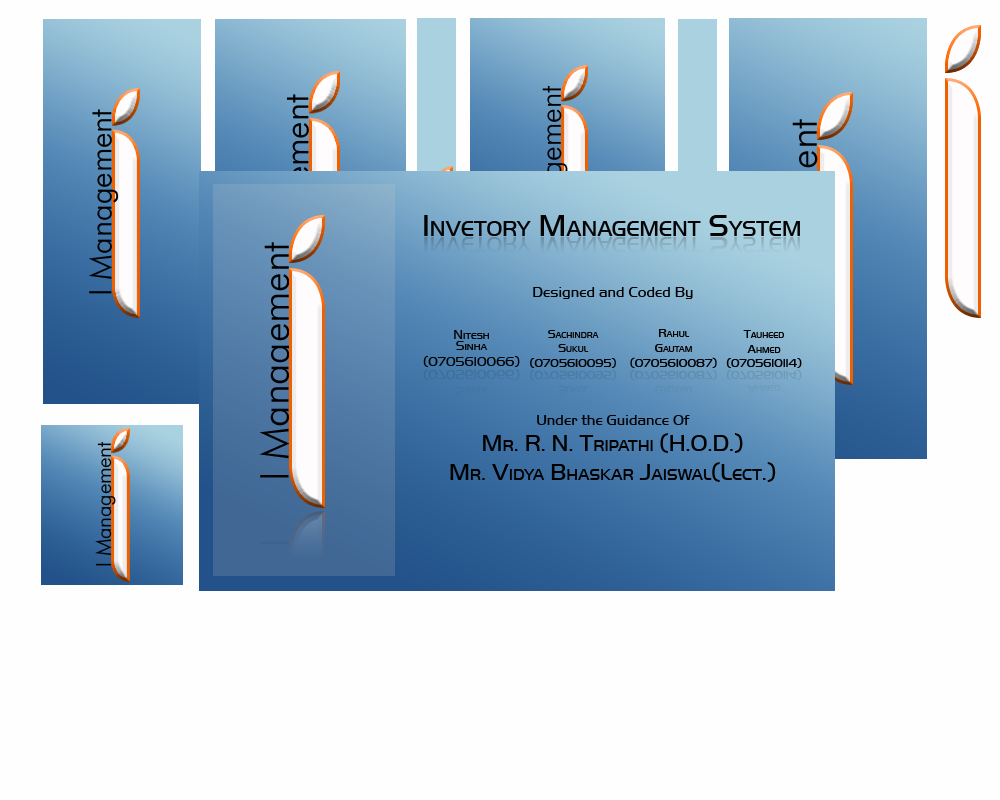
<style>
.page{position:relative;width:1000px;height:800px;background:#fefefe}
.page>*{position:absolute;margin:0}
.t1{font:29.5px "FuturaBT-Light"}
.t2{font:30.9px "FuturaBT-Light";color:#000000}
.t3{font:31.5px "HandelGotD-Ligh";color:#030303;font-variant:small-caps}
.t4{font:39.4px "FuturaBT-Light";color:#000000}
.t5{font:15.4px "HandelGotD-Ligh";color:#030303}
.t6{font:12.4px "HandelGotD-Ligh";color:#030303;font-variant:small-caps}
.t7{font:13.7px/11.1px "HandelGotD-Ligh";color:#030303;font-variant:small-caps}
.t8{font:13.7px "HandelGotD-Ligh";color:#030303;font-variant:small-caps}
.t9{font:12.3px "HandelGotD-Ligh";color:#030303;font-variant:small-caps}
.t10{font:12.1px "HandelGotD-Ligh";color:#010101;font-variant:small-caps}
.t11{font:23.8px/29.3px "HandelGotD-Ligh";color:#010101;font-variant:small-caps}
.t12{font:20.7px "FuturaBT-Light";color:#000000}
</style>
<div class="page">
<p class="t1" style="left:539px;top:85px;width:29px;height:177px;rotate:-90deg">I Management</p>
<p class="t2" style="left:89px;top:109px;width:30px;height:185px;rotate:-90deg">I Management</p>
<p class="t3" style="left:424px;top:215px;width:376px;height:21px">Invetory Management System</p>
<p class="t4" style="left:259px;top:242px;width:39px;height:236px;rotate:-90deg">I Management</p>
<p class="t5" style="left:533px;top:287px;width:160px;height:12px">Designed and Coded By</p>
<p class="t6" style="left:630px;top:329px;width:87px;height:39px;text-align:center">Rahul<br>Gautam<br>(0705610087)</p>
<p class="t7" style="left:423px;top:330px;width:97px;height:37px;text-align:center">Nitesh<br>Sinha<br><span class="t8">(0705610066)</span></p>
<p class="t9" style="left:530px;top:330px;width:86px;height:38px;text-align:center">Sachindra<br>Sukul<br>(0705610095)</p>
<p class="t10" style="left:726px;top:330px;width:76px;height:38px;text-align:center">Tauheed<br>Ahmed<br>(0705610114)</p>
<p class="t5" style="left:537px;top:415px;width:153px;height:10px">Under the Guidance Of</p>
<p class="t11" style="left:450px;top:433px;width:326px;height:49px;text-align:center">Mr. R. N. Tripathi (H.O.D.)<br>Mr. Vidya Bhaskar Jaiswal(Lect.)</p>
<p class="t12" style="left:95px;top:441px;width:21px;height:125px;rotate:-90deg">I Management</p>
</div>
